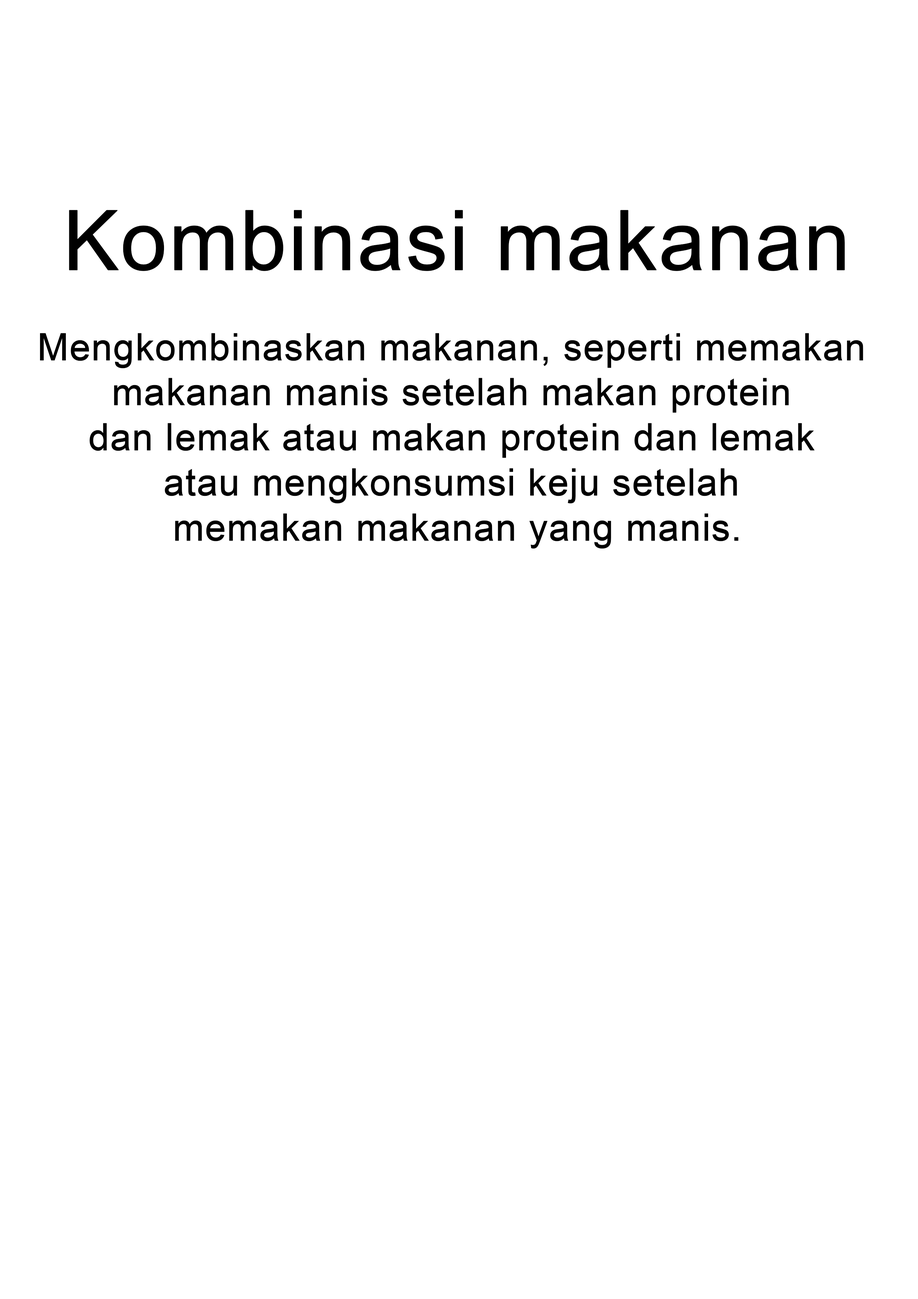
<style>
.page{position:relative;width:918px;height:1299px;background:#ffffff}
.page>*{position:absolute;margin:0}
.t1{font:37.6px "ArialMT";color:#000000;font-weight:bold}
.t2{font:82.9px "ArialMT";color:#000000;font-weight:bold}
</style>
<div class="page">
<p class="t1" style="left:40px;top:210px;width:823px;height:339px;text-align:center"><span class="t2">Kombinasi makanan<br></span><br>Mengkombinaskan makanan, seperti memakan <br>makanan manis setelah makan protein <br>dan lemak atau makan protein dan lemak <br>atau mengkonsumsi keju setelah <br>memakan makanan yang manis.</p>
</div>
